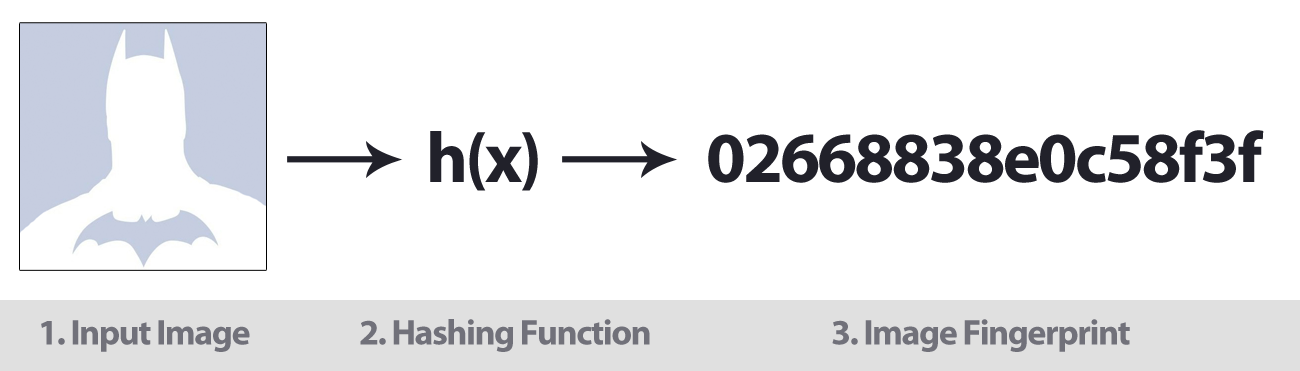
<style>
.page{position:relative;width:1300px;height:371px;background:#ffffff}
.page>*{position:absolute;margin:0}
.t1{font:72px "MyriadPro-Bold";letter-spacing:-0.04em;color:#21212a}
.t2{font:36px "MyriadPro-Bold";letter-spacing:-0.04em;color:#71717a}
</style>
<div class="page">
<p class="t1" style="left:430px;top:131px;width:108px;height:60px">h(x)</p>
<p class="t1" style="left:708px;top:130px;width:556px;height:53px">02668838e0c58f3f</p>
<p class="t2" style="left:41px;top:320px;width:209px;height:32px">1. Input Image</p>
<p class="t2" style="left:360px;top:319px;width:290px;height:33px">2. Hashing Function</p>
<p class="t2" style="left:832px;top:319px;width:298px;height:33px">3. Image Fingerprint</p>
</div>
